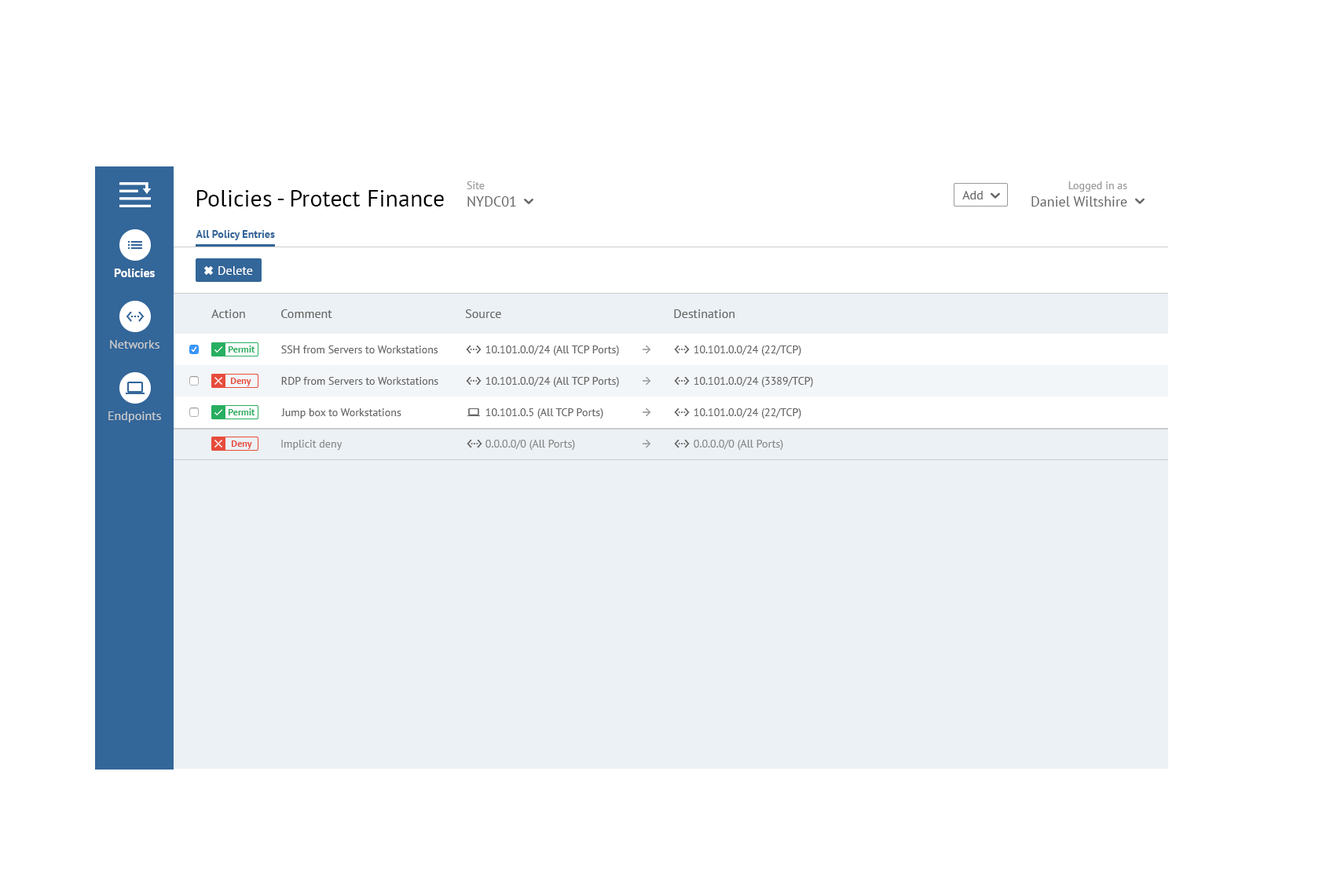
<style>
.page{position:relative;width:1337px;height:892px;background:#ffffff}
.page>*{position:absolute;margin:0}
.t1{font:14.1px "PTSans-Regular";color:#666666}
.t2{font:11px "PTSans-Regular";color:#999999}
.t3{font:14.3px "PTSans-Regular";color:#666666}
.t4{font:11.1px "PTSans-Regular";color:#999999}
.t5{font:23.6px "PTSans-Regular";color:#000000}
.t6{font:12.6px "PTSans-Regular";color:#666666}
.t7{font:10.9px "PTSans-Bold";color:#336699}
.t8{font:12.6px "PTSans-Bold";color:#ffffff}
.t9{font:12.6px "PTSans-Regular";color:#ffffff}
.t10{font:12.6px "PTSans-Regular";color:#cccccc}
.t11{font:9.4px "PTSans-Bold";color:#27ae60}
.t12{font:11px "PTSans-Regular";color:#666666}
.t13{font:9.4px "PTSans-Bold";color:#e74c3c}
.t14{font:11px "PTSans-Regular";color:#888888}
</style>
<div class="page">
<p class="t1" style="left:466px;top:181px;width:50px;height:26px"><span class="t2">Site<br></span>NYDC01</p>
<p class="t3" style="left:1031px;top:181px;width:96px;height:26px;text-align:right"><span class="t4">Logged in as<br></span>Daniel Wiltshire</p>
<p class="t5" style="left:197px;top:190px;width:247px;height:17px">Policies - Protect Finance</p>
<p class="t6" style="left:962px;top:191px;width:20px;height:8px">Add</p>
<p class="t7" style="left:196px;top:230px;width:79px;height:10px">All Policy Entries</p>
<p class="t8" style="left:114px;top:269px;width:41px;height:8px">Policies</p>
<p class="t9" style="left:218px;top:266px;width:35px;height:9px">Delete</p>
<p class="t6" style="left:211px;top:309px;width:34px;height:9px">Action</p>
<p class="t6" style="left:281px;top:309px;width:51px;height:9px">Comment</p>
<p class="t6" style="left:465px;top:309px;width:36px;height:9px">Source</p>
<p class="t6" style="left:674px;top:309px;width:60px;height:9px">Destination</p>
<p class="t10" style="left:110px;top:340px;width:49px;height:9px">Networks</p>
<p class="t11" style="left:228px;top:346px;width:27px;height:7px">Permit</p>
<p class="t12" style="left:281px;top:346px;width:157px;height:7px">SSH from Servers to Workstations</p>
<p class="t12" style="left:485px;top:346px;width:134px;height:10px">10.101.0.0/24 (All TCP Ports)</p>
<p class="t12" style="left:693px;top:346px;width:108px;height:10px">10.101.0.0/24 (22/TCP)</p>
<p class="t13" style="left:230px;top:378px;width:21px;height:8px">Deny</p>
<p class="t12" style="left:281px;top:377px;width:157px;height:8px">RDP from Servers to Workstations</p>
<p class="t12" style="left:485px;top:377px;width:134px;height:10px">10.101.0.0/24 (All TCP Ports)</p>
<p class="t12" style="left:693px;top:377px;width:120px;height:10px">10.101.0.0/24 (3389/TCP)</p>
<p class="t10" style="left:108px;top:412px;width:53px;height:11px">Endpoints</p>
<p class="t11" style="left:228px;top:408px;width:27px;height:7px">Permit</p>
<p class="t12" style="left:281px;top:408px;width:120px;height:11px">Jump box to Workstations</p>
<p class="t12" style="left:485px;top:408px;width:118px;height:11px">10.101.0.5 (All TCP Ports)</p>
<p class="t12" style="left:693px;top:408px;width:108px;height:11px">10.101.0.0/24 (22/TCP)</p>
<p class="t13" style="left:231px;top:441px;width:21px;height:8px">Deny</p>
<p class="t14" style="left:281px;top:440px;width:61px;height:10px">Implicit deny</p>
<p class="t14" style="left:485px;top:440px;width:90px;height:10px">0.0.0.0/0 (All Ports)</p>
<p class="t14" style="left:693px;top:440px;width:90px;height:10px">0.0.0.0/0 (All Ports)</p>
</div>
